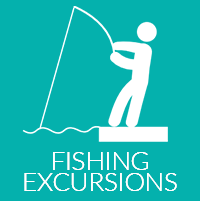
<style>
.page{position:relative;width:200px;height:201px;background:#04b1ad}
.page>*{position:absolute;margin:0}
.t1{font:25.7px/20.3px "Lato-Light";color:#ffffff;text-transform:uppercase}
.t2{font:25.7px "Lato-Light";color:#ffffff;text-transform:uppercase}
</style>
<div class="page">
<p class="t1" style="left:24px;top:152px;width:153px;height:39px;text-align:center"><span class="t2">fishing<br></span>excursions</p>
<p class="t1" style="left:24px;top:152px;width:153px;height:39px;text-align:center"><span class="t2">fishing<br></span>excursions</p>
</div>
